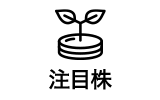
<style>
.page{position:relative;width:160px;height:100px;background:#ffffff}
.page>*{position:absolute;margin:0}
.t1{font:22px "HiraginoSans-W5";color:#000000}
</style>
<div class="page">
<p class="t1" style="left:49px;top:69px;width:63px;height:21px">注目株</p>
</div>
